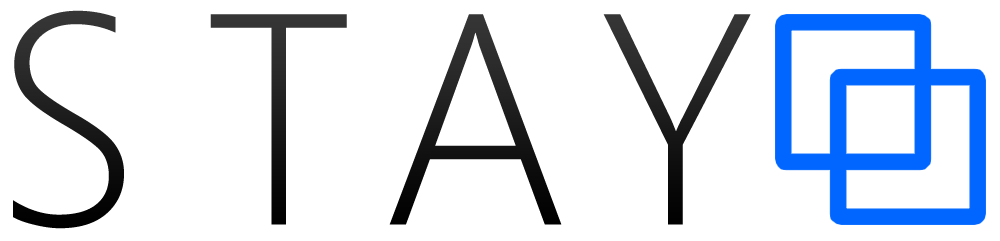
<style>
.page{position:relative;width:1000px;height:241px;background:#ffffff}
.page>*{position:absolute;margin:0}
.t1{font:300px "SegoeUI-Light";letter-spacing:0.2em;color:#292929}
</style>
<div class="page">
<p class="t1" style="left:13px;top:10px;width:738px;height:219px">STAY</p>
</div>
